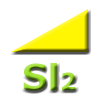
<style>
.page{position:relative;width:100px;height:100px;background:#ffffff}
.page>*{position:absolute;margin:0}
.t1{font:36px "Verdana-Bold"}
.t2{font:24px "Verdana-Bold"}
</style>
<div class="page">
<p class="t1" style="left:23px;top:63px;width:53px;height:28px">Sl<span class="t2">2</span></p>
</div>
